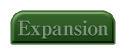
<style>
.page{position:relative;width:126px;height:55px;background:#ffffff}
.page>*{position:absolute;margin:0}
.t1{font:20px "RyuminPro-ExBold";letter-spacing:-0.04em;color:#7e947c}
</style>
<div class="page">
<p class="t1" style="left:18px;top:20px;width:90px;height:19px">Expansion</p>
</div>
